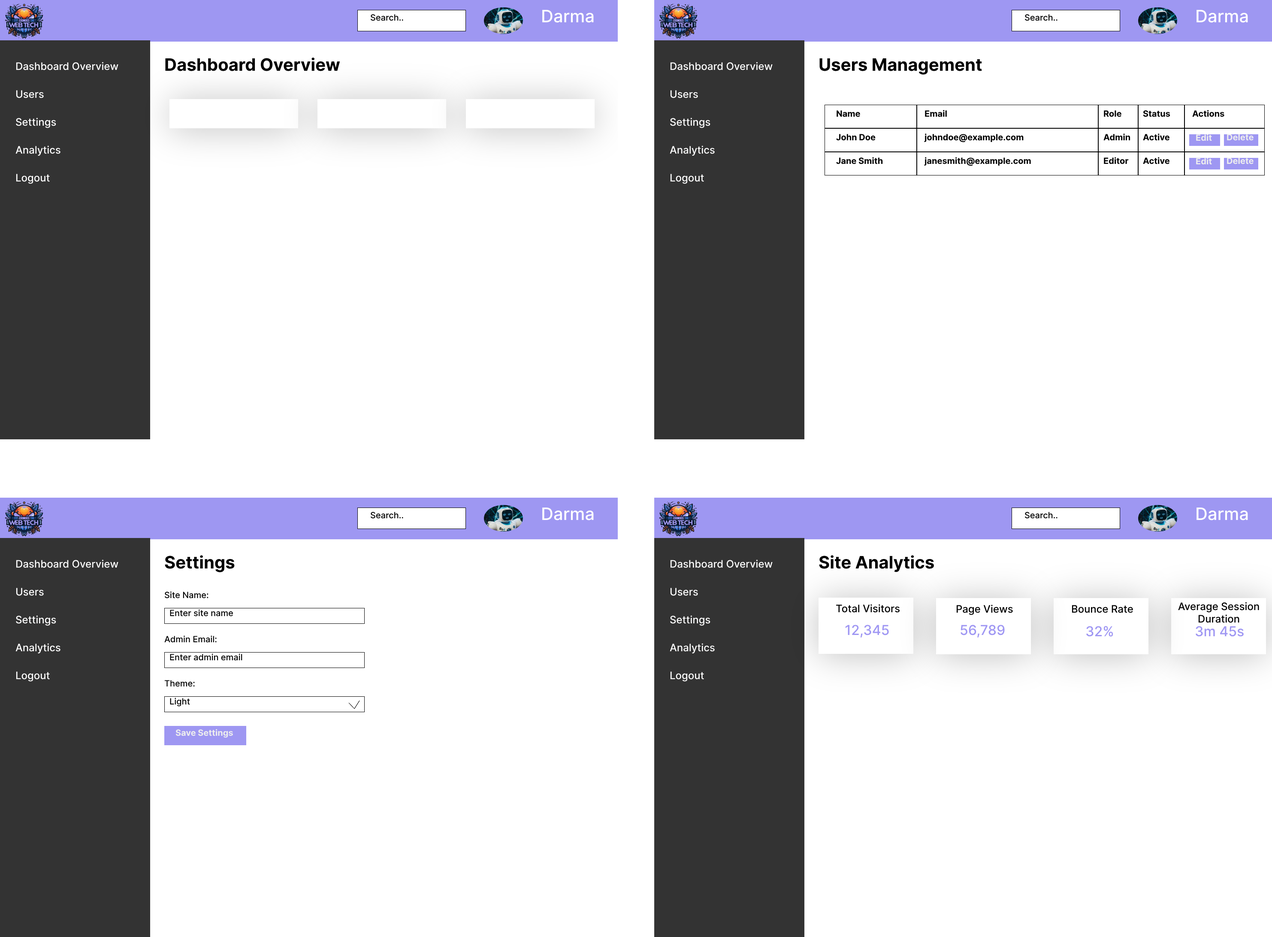
<style>
.page{position:relative;width:1272px;height:937px;background:#ffffff}
.page>*{position:absolute;margin:0}
.t1{font:8.6px "Inter-Medium";color:#000000}
.t2{font:17.2px "Inter-Medium";color:#ffffff}
.t3{font:10.3px "Inter-Medium";color:#ffffff}
.t4{font:17.2px "Inter-Bold";color:#000000}
.t5{font:8.6px "Inter-Bold";color:#000000}
.t6{font:8.6px "Inter-Bold";color:#eeeeee}
.t7{font:10.3px "Inter-Medium";color:#000000}
.t8{font:13.7px "Inter-Medium";color:#9f97f3}
</style>
<div class="page">
<p class="t1" style="left:371px;top:14px;width:32px;height:7px">Search..</p>
<p class="t2" style="left:542px;top:9px;width:52px;height:14px">Darma</p>
<p class="t1" style="left:1025px;top:14px;width:33px;height:7px">Search..</p>
<p class="t2" style="left:1197px;top:9px;width:51px;height:14px">Darma</p>
<p class="t3" style="left:16px;top:62px;width:102px;height:8px">Dashboard Overview</p>
<p class="t4" style="left:165px;top:58px;width:175px;height:13px">Dashboard Overview</p>
<p class="t3" style="left:670px;top:62px;width:103px;height:8px">Dashboard Overview</p>
<p class="t4" style="left:820px;top:58px;width:162px;height:17px">Users Management</p>
<p class="t3" style="left:16px;top:90px;width:28px;height:8px">Users</p>
<p class="t3" style="left:670px;top:90px;width:28px;height:8px">Users</p>
<p class="t5" style="left:837px;top:110px;width:23px;height:7px">Name</p>
<p class="t5" style="left:925px;top:110px;width:22px;height:7px">Email</p>
<p class="t5" style="left:1104px;top:110px;width:18px;height:7px">Role</p>
<p class="t5" style="left:1143px;top:110px;width:28px;height:7px">Status</p>
<p class="t5" style="left:1193px;top:110px;width:32px;height:7px">Actions</p>
<p class="t3" style="left:16px;top:118px;width:40px;height:10px">Settings</p>
<p class="t3" style="left:670px;top:118px;width:41px;height:10px">Settings</p>
<p class="t5" style="left:836px;top:134px;width:40px;height:7px">John Doe</p>
<p class="t5" style="left:924px;top:133px;width:100px;height:9px">johndoe@example.com</p>
<p class="t5" style="left:1104px;top:133px;width:27px;height:8px">Admin</p>
<p class="t5" style="left:1143px;top:133px;width:27px;height:8px">Active</p>
<p class="t6" style="left:1196px;top:134px;width:16px;height:7px">Edit</p>
<p class="t6" style="left:1227px;top:134px;width:27px;height:7px">Delete</p>
<p class="t3" style="left:15px;top:145px;width:46px;height:11px">Analytics</p>
<p class="t3" style="left:670px;top:145px;width:45px;height:11px">Analytics</p>
<p class="t5" style="left:836px;top:157px;width:47px;height:7px">Jane Smith</p>
<p class="t5" style="left:924px;top:157px;width:107px;height:9px">janesmith@example.com</p>
<p class="t5" style="left:1104px;top:157px;width:25px;height:7px">Editor</p>
<p class="t5" style="left:1143px;top:157px;width:27px;height:7px">Active</p>
<p class="t6" style="left:1196px;top:157px;width:16px;height:8px">Edit</p>
<p class="t6" style="left:1227px;top:157px;width:27px;height:7px">Delete</p>
<p class="t3" style="left:16px;top:174px;width:34px;height:10px">Logout</p>
<p class="t3" style="left:670px;top:174px;width:34px;height:10px">Logout</p>
<p class="t2" style="left:542px;top:507px;width:52px;height:14px">Darma</p>
<p class="t2" style="left:1197px;top:507px;width:51px;height:14px">Darma</p>
<p class="t1" style="left:371px;top:512px;width:32px;height:7px">Search..</p>
<p class="t1" style="left:1025px;top:512px;width:33px;height:7px">Search..</p>
<p class="t4" style="left:165px;top:555px;width:70px;height:17px">Settings</p>
<p class="t4" style="left:819px;top:555px;width:115px;height:17px">Site Analytics</p>
<p class="t3" style="left:16px;top:560px;width:102px;height:8px">Dashboard Overview</p>
<p class="t3" style="left:670px;top:560px;width:103px;height:8px">Dashboard Overview</p>
<p class="t3" style="left:16px;top:588px;width:28px;height:8px">Users</p>
<p class="t1" style="left:165px;top:591px;width:44px;height:8px">Site Name:</p>
<p class="t3" style="left:670px;top:588px;width:28px;height:8px">Users</p>
<p class="t7" style="left:836px;top:604px;width:64px;height:9px">Total Visitors</p>
<p class="t7" style="left:957px;top:605px;width:56px;height:10px">Page Views</p>
<p class="t7" style="left:1072px;top:605px;width:61px;height:8px">Bounce Rate</p>
<p class="t7" style="left:1178px;top:602px;width:81px;height:21px;text-align:center">Average Session<br>Duration</p>
<p class="t3" style="left:16px;top:615px;width:40px;height:11px">Settings</p>
<p class="t1" style="left:170px;top:609px;width:63px;height:8px">Enter site name</p>
<p class="t3" style="left:670px;top:615px;width:41px;height:11px">Settings</p>
<p class="t8" style="left:845px;top:625px;width:44px;height:13px">12,345</p>
<p class="t8" style="left:961px;top:625px;width:44px;height:13px">56,789</p>
<p class="t8" style="left:1087px;top:626px;width:27px;height:11px">32%</p>
<p class="t8" style="left:1196px;top:626px;width:48px;height:11px">3m 45s</p>
<p class="t1" style="left:164px;top:636px;width:53px;height:7px">Admin Email:</p>
<p class="t3" style="left:15px;top:643px;width:46px;height:11px">Analytics</p>
<p class="t1" style="left:170px;top:654px;width:72px;height:7px">Enter admin email</p>
<p class="t3" style="left:670px;top:643px;width:45px;height:11px">Analytics</p>
<p class="t3" style="left:16px;top:672px;width:34px;height:10px">Logout</p>
<p class="t3" style="left:670px;top:672px;width:34px;height:10px">Logout</p>
<p class="t1" style="left:164px;top:680px;width:31px;height:7px">Theme:</p>
<p class="t1" style="left:170px;top:698px;width:20px;height:9px">Light</p>
<p class="t6" style="left:176px;top:729px;width:57px;height:9px">Save Settings</p>
</div>
